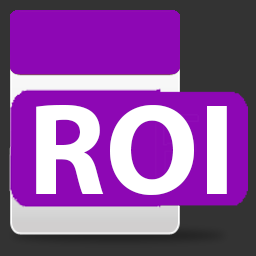
<style>
.page{position:relative;width:256px;height:256px;background:#8d07b4}
.page>*{position:absolute;margin:0}
.t1{font:130px "MyriadHebrew-Bold";color:#ffffff}
</style>
<div class="page">
<p class="t1" style="left:36px;top:104px;width:191px;height:91px">ROI</p>
</div>
